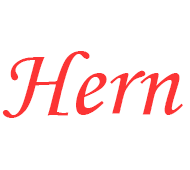
<style>
.page{position:relative;width:190px;height:170px;background:#ffffff}
.page>*{position:absolute;margin:0}
.t1{font:100px "STLiti";color:#fc3434}
</style>
<div class="page">
<p class="t1" style="left:2px;top:51px;width:181px;height:67px">Hern</p>
</div>
